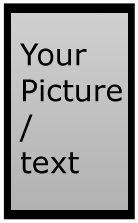
<style>
.page{position:relative;width:138px;height:223px}
.page>*{position:absolute;margin:0}
.t1{font:30px "Verdana";color:#000000}
</style>
<div class="page">
<p class="t1" style="left:19px;top:43px;width:103px;height:131px">Your <br>Picture<br>/<br>text</p>
</div>
